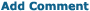
<style>
.page{position:relative;width:90px;height:11px;background:#ffffff}
.page>*{position:absolute;margin:0}
.t1{font:11.1px "Verdana-Bold";color:#0f628b}
</style>
<div class="page">
<p class="t1" style="left:1px;top:1px;width:88px;height:10px">Add Comment</p>
</div>
